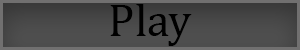
<style>
.page{position:relative;width:300px;height:50px}
.page>*{position:absolute;margin:0}
.t1{font:45.8px "CambriaMath";color:#000000}
</style>
<div class="page">
<p class="t1" style="left:110px;top:4px;width:82px;height:42px">Play</p>
</div>
